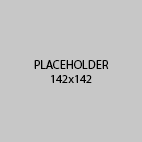
<style>
.page{position:relative;width:142px;height:142px;background:#c7c7c7}
.page>*{position:absolute;margin:0}
.t1{font:12px "MyriadPro-Regular";color:#000000}
</style>
<div class="page">
<p class="t1" style="left:34px;top:60px;width:75px;height:23px;text-align:center">PLACEHOLDER<br>142x142</p>
</div>
